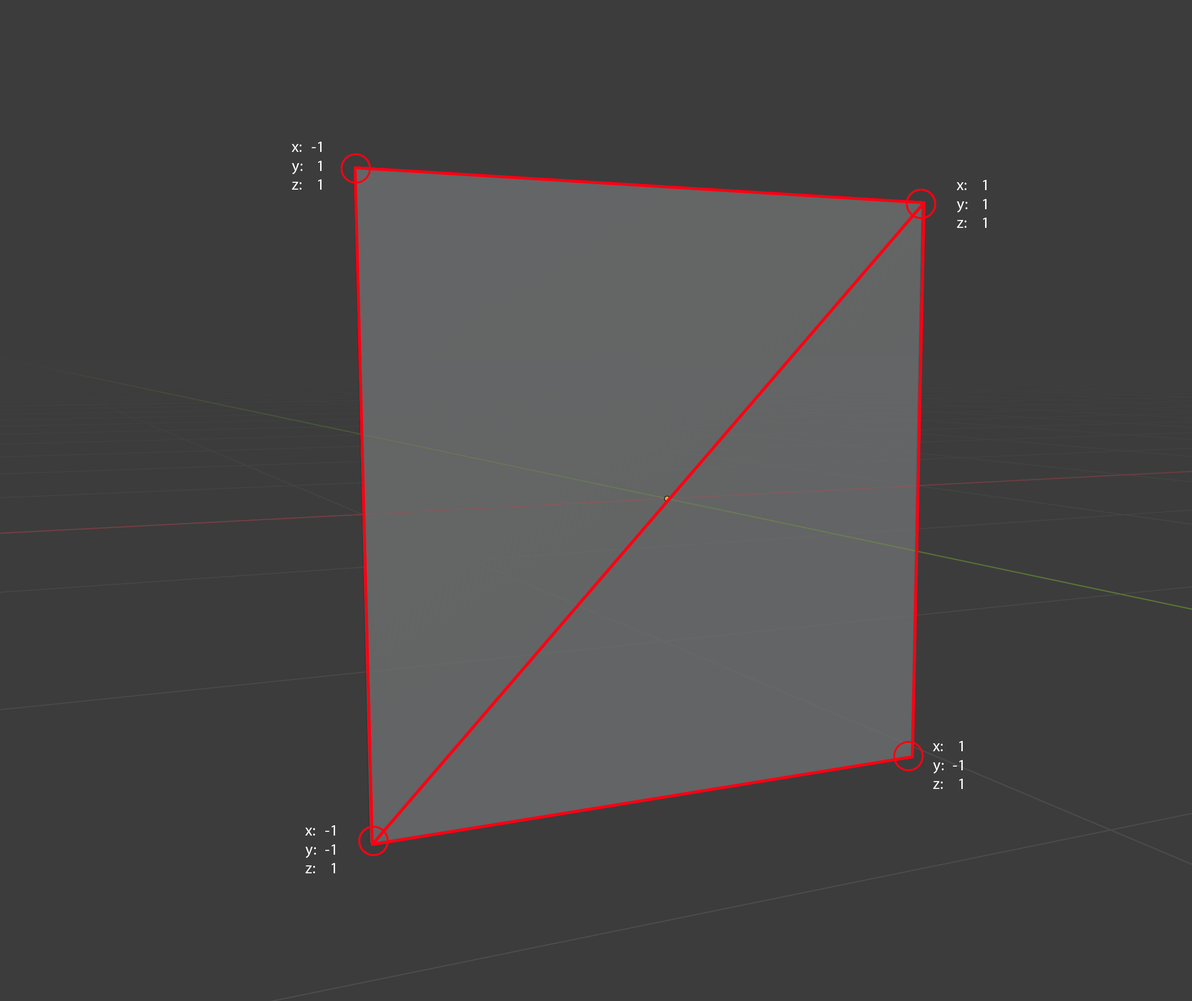
<style>
.page{position:relative;width:1192px;height:1001px;background:#3c3c3c}
.page>*{position:absolute;margin:0}
.t1{font:15.8px "MyriadPro-Regular";color:#ffffff}
</style>
<div class="page">
<p class="t1" style="left:292px;top:144px;width:10px;height:46px">x:<br>y:<br>z:</p>
<p class="t1" style="left:312px;top:142px;width:9px;height:48px;text-align:right">-1<br>1<br>1</p>
<p class="t1" style="left:956px;top:182px;width:11px;height:46px">x:<br>y:<br>z:</p>
<p class="t1" style="left:982px;top:180px;width:4px;height:48px;text-align:right">1<br>1<br>1</p>
<p class="t1" style="left:933px;top:743px;width:10px;height:46px">x:<br>y:<br>z:</p>
<p class="t1" style="left:953px;top:741px;width:9px;height:48px;text-align:right">1<br>-1<br>1</p>
<p class="t1" style="left:305px;top:827px;width:11px;height:46px">x:<br>y:<br>z:</p>
<p class="t1" style="left:325px;top:825px;width:10px;height:48px;text-align:right">-1<br>-1<br>1</p>
</div>
